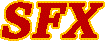
<style>
.page{position:relative;width:105px;height:41px;background:#bb0000}
.page>*{position:absolute;margin:0}
.t1{font:52.9px "SitkaText-BoldItalic";color:#c00007;font-weight:bold;scale:0.93 1}
</style>
<div class="page">
<p class="t1" style="left:2px;top:2px;width:101px;height:37px">SFX</p>
</div>
